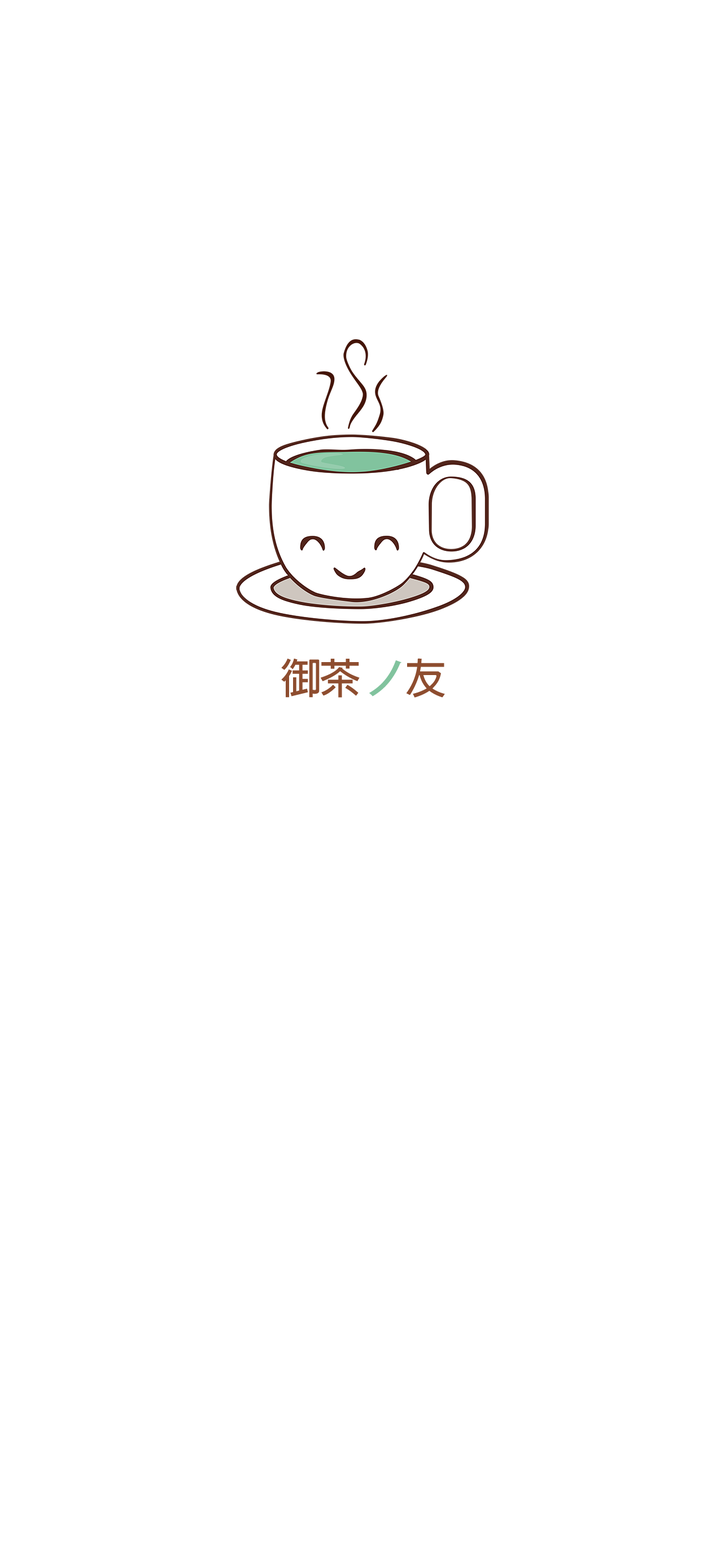
<style>
.page{position:relative;width:725px;height:1568px;background:#ffffff}
.page>*{position:absolute;margin:0}
.t1{font:41.5px "AdobeFanHeitiStd-Bold";letter-spacing:-0.05em;color:#8e4d2f}
.t2{font:41.5px "AdobeFanHeitiStd-Bold";letter-spacing:-0.05em;color:#81c39e}
</style>
<div class="page">
<p class="t1" style="left:281px;top:658px;width:164px;height:40px">御茶 <span class="t2">ノ</span>友</p>
</div>
